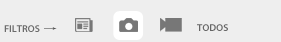
<style>
.page{position:relative;width:281px;height:42px;background:#eeeeee}
.page>*{position:absolute;margin:0}
.t1{font:10px "MyriadPro-Semibold";color:#6b6b6b}
.t2{font:10px "MyriadPro-Semibold";color:#666666}
</style>
<div class="page">
<p class="t1" style="left:4px;top:25px;width:36px;height:7px">FILTROS</p>
<p class="t2" style="left:197px;top:24px;width:31px;height:7px">TODOS</p>
</div>
